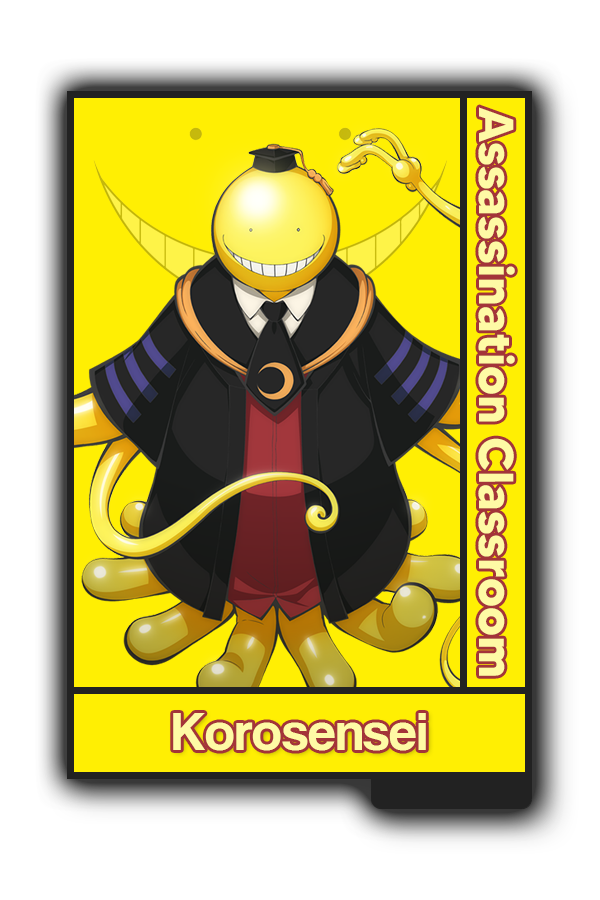
<style>
.page{position:relative;width:600px;height:900px;background:#ffffff}
.page>*{position:absolute;margin:0}
.t1{font:48.8px "MADETOMMY-Bold";color:#fefaa5}
.t2{font:55px "CoolveticaRg-Regular";color:#fefaa5}
</style>
<div class="page">
<p class="t1" style="left:478px;top:107px;width:37px;height:569px;rotate:90deg">Assassination Classroom</p>
<p class="t2" style="left:173px;top:713px;width:253px;height:38px">Korosensei</p>
</div>
